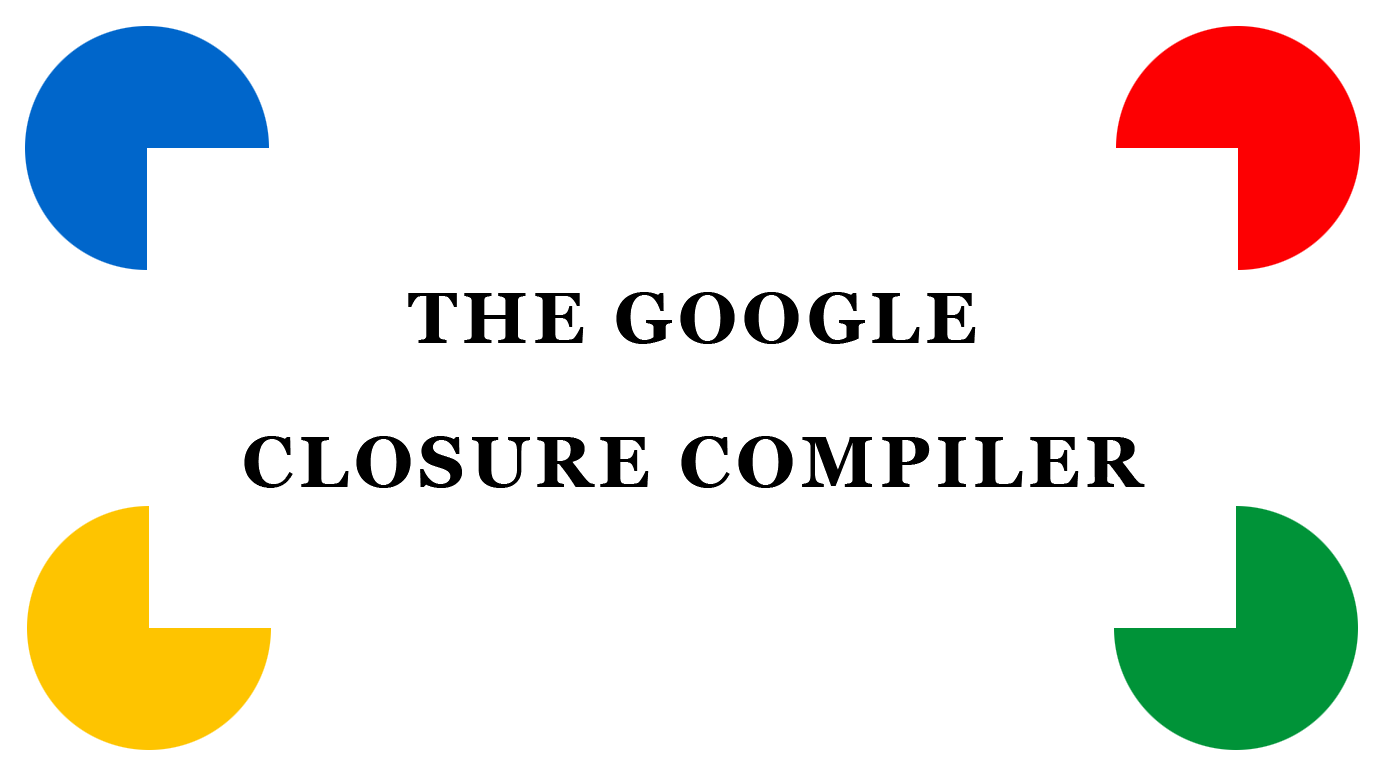
<style>
.page{position:relative;width:1385px;height:779px;background:#ffffff}
.page>*{position:absolute;margin:0}
.t1{font:72px/72px "Georgia-Bold";letter-spacing:0.075em;color:#000000;text-transform:uppercase}
</style>
<div class="page">
<p class="t1" style="left:244px;top:292px;width:901px;height:196px;text-align:center">The Google<br> <br>closure compiler</p>
<p class="t1" style="left:244px;top:292px;width:901px;height:196px;text-align:center">The Google<br> <br>closure compiler</p>
</div>
